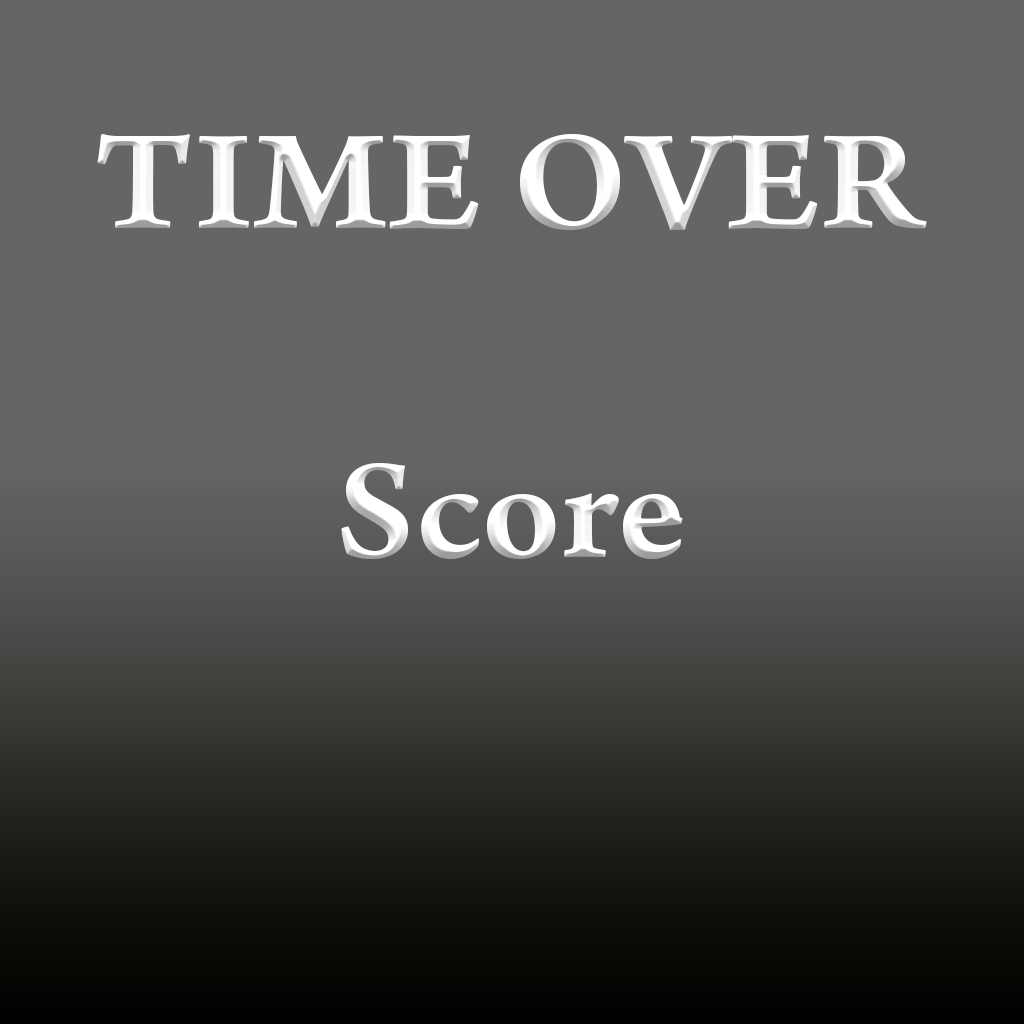
<style>
.page{position:relative;width:1024px;height:1024px;background:#656565}
.page>*{position:absolute;margin:0}
.t1{font:150px "ArnoPro-SmbdCaption";color:#ffffff}
</style>
<div class="page">
<p class="t1" style="left:97px;top:134px;width:830px;height:96px">TIME OVER</p>
<p class="t1" style="left:341px;top:463px;width:342px;height:96px">Score</p>
</div>
